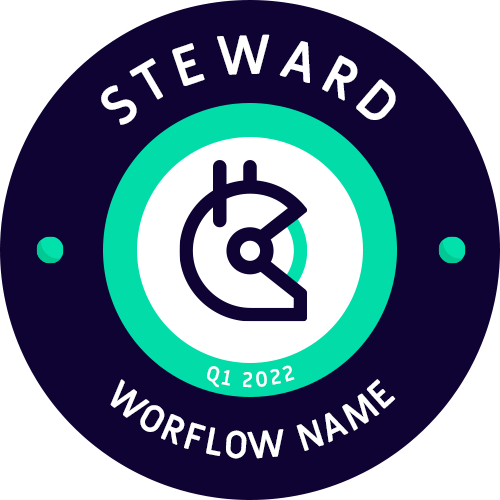
<style>
.page{position:relative;width:500px;height:500px;background:#0e0333}
.page>*{position:absolute;margin:0}
.t1{font:54.2px "MiriamLibre-Bold";color:#ffffff}
.t2{font:20.8px "MiriamLibre-Bold";letter-spacing:0.2em;color:#ffffff}
.t3{font:37.5px "MiriamLibre-Bold";letter-spacing:0.2em;color:#ffffff;text-transform:uppercase}
</style>
<div class="page">
<p class="t1" style="left:101px;top:34px;width:295px;height:91px">STEWARD</p>
<p class="t2" style="left:207px;top:365px;width:88px;height:23px">Q1 2022</p>
<p class="t3" style="left:110px;top:379px;width:286px;height:80px;text-align:center">WORFLOW NAME</p>
</div>
